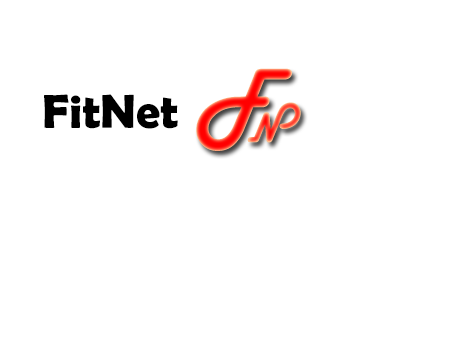
<style>
.page{position:relative;width:454px;height:340px;background:#ffffff}
.page>*{position:absolute;margin:0}
.t1{font:92.2px "HarlowSolid"}
.t2{font:48px "BerlinSansFBDemi-Bold";color:#000000}
.t3{font:44.6px "HarlowSolid"}
</style>
<div class="page">
<p class="t1" style="left:196px;top:68px;width:96px;height:83px">F</p>
<p class="t2" style="left:44px;top:94px;width:134px;height:35px">FitNet</p>
<p class="t3" style="left:247px;top:102px;width:54px;height:41px;rotate:180deg">N</p>
</div>
